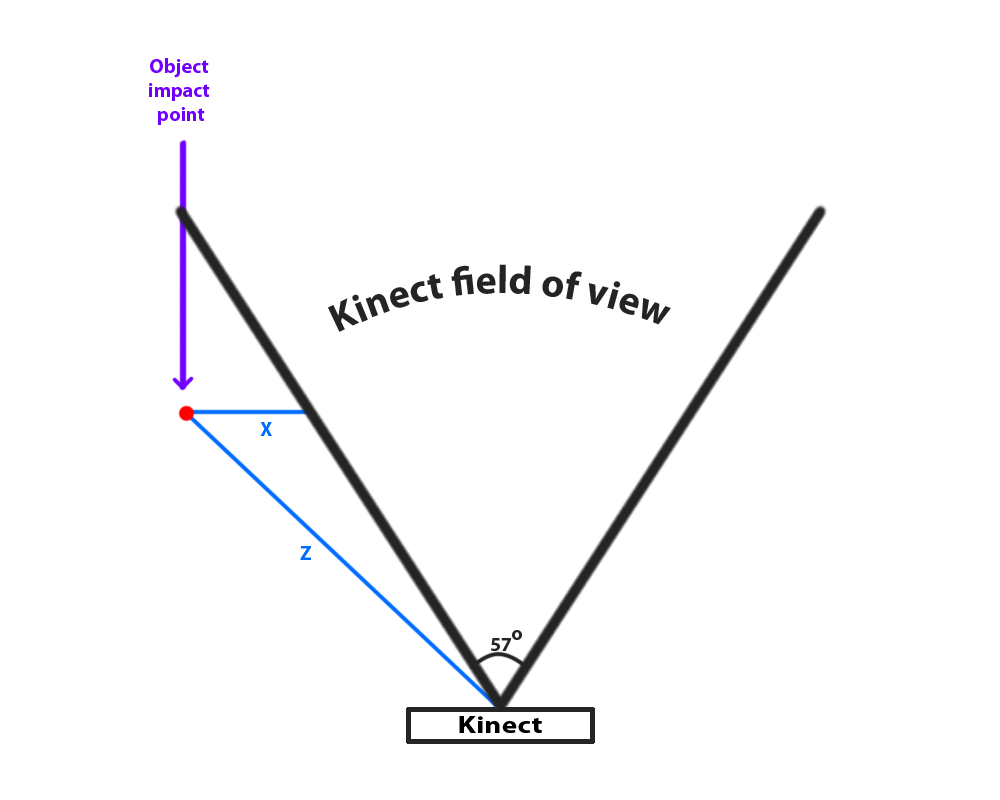
<style>
.page{position:relative;width:1000px;height:800px;background:#ffffff}
.page>*{position:absolute;margin:0}
.t1{font:20px "MyriadPro-Bold";color:#7200ff}
.t2{font:40px "MyriadPro-Bold";color:#242424}
.t3{font:20px "MyriadPro-Bold";color:#006cff}
.t4{font:20px "MyriadPro-Bold";color:#242424}
.t5{font:24px "MyriadPro-Bold";color:#000000;scale:1.25 1}
</style>
<div class="page">
<p class="t1" style="left:149px;top:58px;width:61px;height:67px;text-align:center">Object <br>impact <br>point</p>
<p class="t2" style="left:328px;top:264px;width:343px;height:68px;text-align:center">Kinect field of view</p>
<p class="t3" style="left:260px;top:422px;width:12px;height:14px">X</p>
<p class="t3" style="left:300px;top:546px;width:11px;height:14px">Z</p>
<p class="t4" style="left:512px;top:630px;width:10px;height:10px">o</p>
<p class="t4" style="left:491px;top:638px;width:20px;height:13px">57</p>
<p class="t5" style="left:459px;top:716px;width:83px;height:17px">Kinect</p>
</div>
